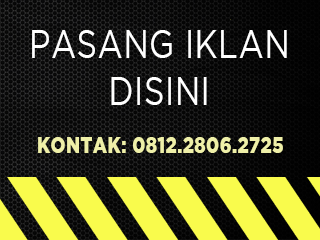
<style>
.page{position:relative;width:320px;height:240px}
.page>*{position:absolute;margin:0}
.t1{font:39.7px "GothamBook";letter-spacing:0.02em;color:#ffffff;scale:0.8 1}
.t2{font:23.4px "GothamBlack";letter-spacing:0.02em;color:#eff0a8;scale:0.77 1}
</style>
<div class="page">
<p class="t1" style="left:32px;top:30px;width:255px;height:75px;text-align:center">PASANG IKLAN<br>DISINI</p>
<p class="t2" style="left:38px;top:137px;width:245px;height:16px">KONTAK: 0812.2806.2725</p>
</div>
